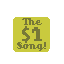
<style>
.page{position:relative;width:64px;height:64px;background:#ffffff}
.page>*{position:absolute;margin:0}
.t1{font:10px/8px "Superscript";color:#777837}
.t2{font:10px "Superscript";color:#777837}
.t3{font:20px/16px "MyriadPro-Regular";color:#777837}
.t4{font:20px/16px "Superscript";color:#777837}
</style>
<div class="page">
<p class="t1" style="left:17px;top:18px;width:29px;height:33px;text-align:center"><span class="t2">The<br></span><span class="t3">$</span><span class="t4">1<br></span>Song!</p>
</div>
